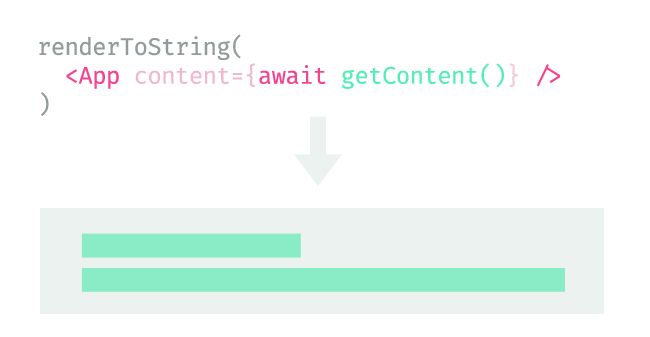
<style>
.page{position:relative;width:650px;height:337px;background:#ffffff}
.page>*{position:absolute;margin:0}
.t1{font:24px "FiraCode-Regular";letter-spacing:-0.025em;color:#929b98}
.t2{font:24px "FiraCode-Regular";letter-spacing:-0.025em;color:#f54391}
.t3{font:24px "FiraCode-Regular";letter-spacing:-0.025em;color:#efbad1}
.t4{font:24px "FiraCode-Regular";letter-spacing:-0.025em;color:#54edb5}
.t5{font:24px "FiraCode-Regular";letter-spacing:-0.025em;color:#f3cbdc}
</style>
<div class="page">
<p class="t1" style="left:39px;top:34px;width:521px;height:82px">renderToString(<br>  <span class="t2">&lt;App </span><span class="t3">content={</span><span class="t2">await </span><span class="t4">getContent()</span><span class="t5">}</span><span class="t2"> /&gt;<br></span>)</p>
</div>
